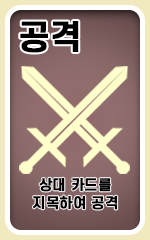
<style>
.page{position:relative;width:150px;height:240px}
.page>*{position:absolute;margin:0}
.t1{font:32.7px "S-CoreDream-6Bold";color:#000000;font-weight:bold}
.t2{font:14px/17.2px "S-CoreDream-6Bold";color:#000000;font-weight:bold}
</style>
<div class="page">
<p class="t1" style="left:20px;top:21px;width:59px;height:32px">공격</p>
<p class="t2" style="left:33px;top:177px;width:85px;height:33px;text-align:center">상대 카드를<br>지목하여 공격</p>
</div>
